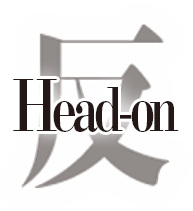
<style>
.page{position:relative;width:193px;height:211px;background:#fefefe}
.page>*{position:absolute;margin:0}
.t1{font:60px "KochoStd-Heavy";letter-spacing:-0.1em;color:#231815;scale:0.8 1}
.t2{font:70px "KochoStd-Heavy";letter-spacing:-0.1em;color:#231815;scale:0.8 1}
</style>
<div class="page">
<p class="t1" style="left:13px;top:79px;width:166px;height:53px"><span class="t2">H</span>ead-on</p>
</div>
